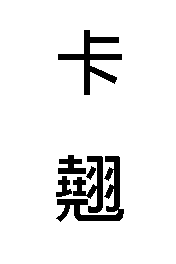
<style>
.page{position:relative;width:176px;height:264px;background:#ffffff}
.page>*{position:absolute;margin:0}
.t1{font:72px "AdobeFanHeitiStd-Bold";color:#000000}
</style>
<div class="page">
<p class="t1" style="left:56px;top:30px;width:68px;height:192px">卡翹</p>
</div>
